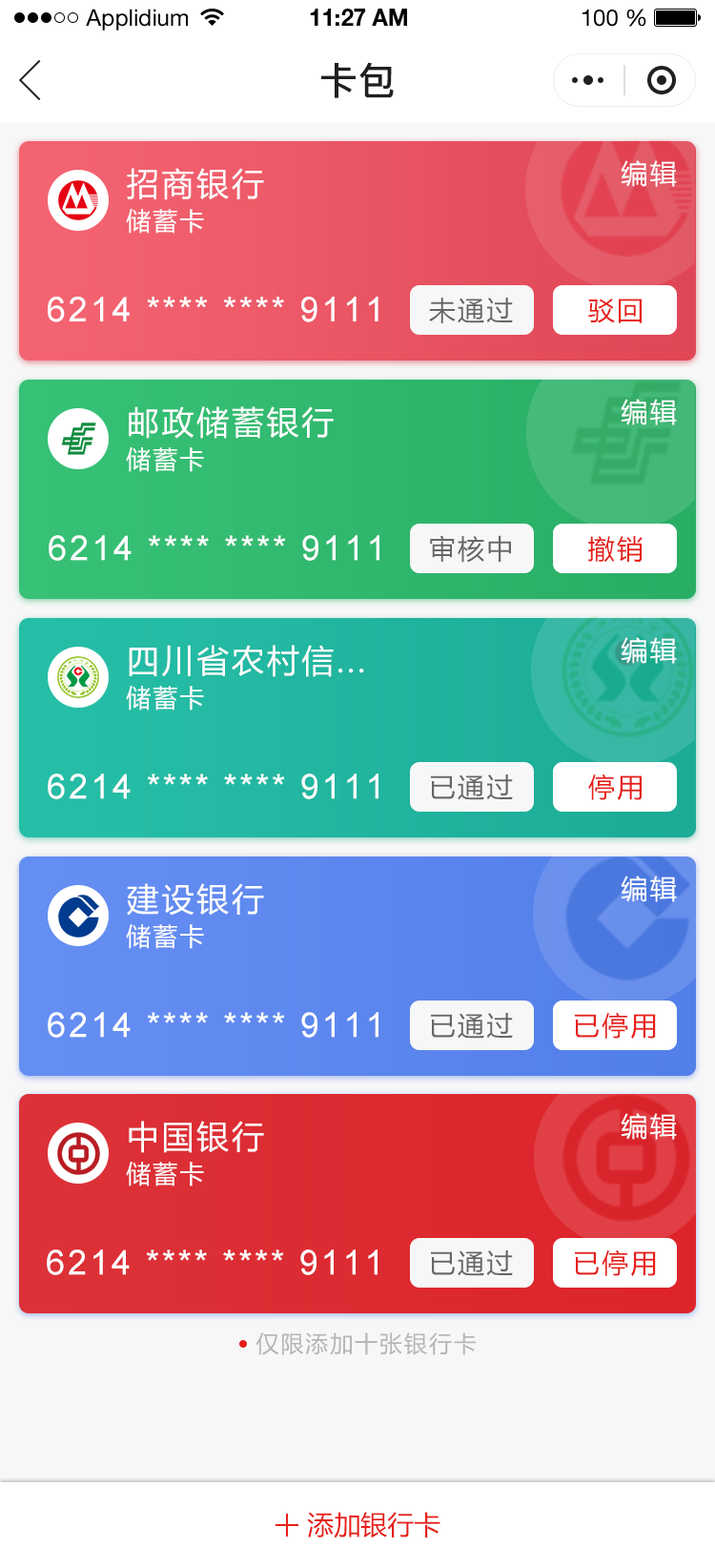
<style>
.page{position:relative;width:715px;height:1568px}
.page>*{position:absolute;margin:0}
.t1{font:22.9px "HelveticaNeueLTStd-Roman";color:#000000}
.t2{font:22.9px "HelveticaNeueLTStd-Bd";color:#000000}
.t3{font:38.2px "PingFang-SC-Bold";color:#202020;text-transform:uppercase}
.t4{font:26.7px "MicrosoftYaHei";letter-spacing:0.08em;color:#ffffff}
.t5{font:32.4px "MicrosoftYaHei";letter-spacing:0.08em;color:#ffffff}
.t6{font:24.8px "MicrosoftYaHei";letter-spacing:0.08em;color:#ffffff}
.t7{font:34.3px "ArialMT";letter-spacing:0.08em;color:#ffffff}
.t8{font:26.7px "MicrosoftYaHei";letter-spacing:0.08em;color:#666666}
.t9{font:26.7px "MicrosoftYaHei";letter-spacing:0.08em;color:#e61f18}
.t10{font:22.9px "MicrosoftYaHei";letter-spacing:0.08em;color:#b6b6b6}
.t11{font:26.7px "MicrosoftYaHei";color:#e61f18;text-transform:uppercase}
</style>
<div class="page">
<p class="t1" style="left:86px;top:9px;width:102px;height:22px">Applidium</p>
<p class="t2" style="left:310px;top:9px;width:97px;height:17px">11:27 AM</p>
<p class="t1" style="left:583px;top:9px;width:64px;height:18px">100 %</p>
<p class="t3" style="left:321px;top:62px;width:73px;height:36px">卡包</p>
<p class="t4" style="left:621px;top:160px;width:56px;height:27px">编辑</p>
<p class="t5" style="left:127px;top:168px;width:137px;height:32px">招商银行</p>
<p class="t6" style="left:126px;top:209px;width:78px;height:25px">储蓄卡</p>
<p class="t7" style="left:48px;top:297px;width:331px;height:25px">6214 **** **** 9111</p>
<p class="t8" style="left:429px;top:298px;width:84px;height:25px">未通过</p>
<p class="t9" style="left:588px;top:299px;width:54px;height:24px">驳回</p>
<p class="t4" style="left:621px;top:399px;width:56px;height:26px">编辑</p>
<p class="t5" style="left:129px;top:406px;width:205px;height:33px">邮政储蓄银行</p>
<p class="t6" style="left:126px;top:447px;width:78px;height:25px">储蓄卡</p>
<p class="t7" style="left:49px;top:535px;width:331px;height:26px">6214 **** **** 9111</p>
<p class="t8" style="left:430px;top:535px;width:81px;height:28px">审核中</p>
<p class="t9" style="left:588px;top:536px;width:55px;height:27px">撤销</p>
<p class="t4" style="left:621px;top:637px;width:56px;height:27px">编辑</p>
<p class="t5" style="left:129px;top:645px;width:235px;height:32px">四川省农村信...</p>
<p class="t6" style="left:126px;top:686px;width:78px;height:25px">储蓄卡</p>
<p class="t7" style="left:48px;top:774px;width:331px;height:25px">6214 **** **** 9111</p>
<p class="t9" style="left:588px;top:774px;width:54px;height:26px">停用</p>
<p class="t8" style="left:431px;top:774px;width:82px;height:26px">已通过</p>
<p class="t4" style="left:621px;top:876px;width:56px;height:26px">编辑</p>
<p class="t5" style="left:127px;top:883px;width:137px;height:33px">建设银行</p>
<p class="t6" style="left:126px;top:924px;width:78px;height:25px">储蓄卡</p>
<p class="t7" style="left:48px;top:1012px;width:331px;height:26px">6214 **** **** 9111</p>
<p class="t8" style="left:431px;top:1013px;width:82px;height:26px">已通过</p>
<p class="t9" style="left:575px;top:1012px;width:81px;height:27px">已停用</p>
<p class="t5" style="left:129px;top:1121px;width:135px;height:32px">中国银行</p>
<p class="t4" style="left:621px;top:1113px;width:56px;height:27px">编辑</p>
<p class="t6" style="left:126px;top:1162px;width:78px;height:24px">储蓄卡</p>
<p class="t7" style="left:47px;top:1249px;width:331px;height:26px">6214 **** **** 9111</p>
<p class="t8" style="left:431px;top:1250px;width:82px;height:26px">已通过</p>
<p class="t9" style="left:575px;top:1249px;width:81px;height:27px">已停用</p>
<p class="t10" style="left:256px;top:1332px;width:220px;height:23px">仅限添加十张银行卡</p>
<p class="t11" style="left:307px;top:1512px;width:134px;height:26px">添加银行卡</p>
</div>
